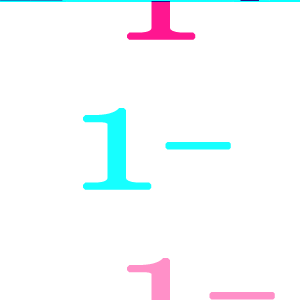
<style>
.page{position:relative;width:300px;height:300px;background:#ffffff}
.page>*{position:absolute;margin:0}
.t1{font:114.5px "YouYuan";color:#16ffff;font-weight:bold;scale:1.95 1}
</style>
<div class="page">
<p class="t1" style="left:83px;top:106px;width:69px;height:82px">1</p>
</div>
